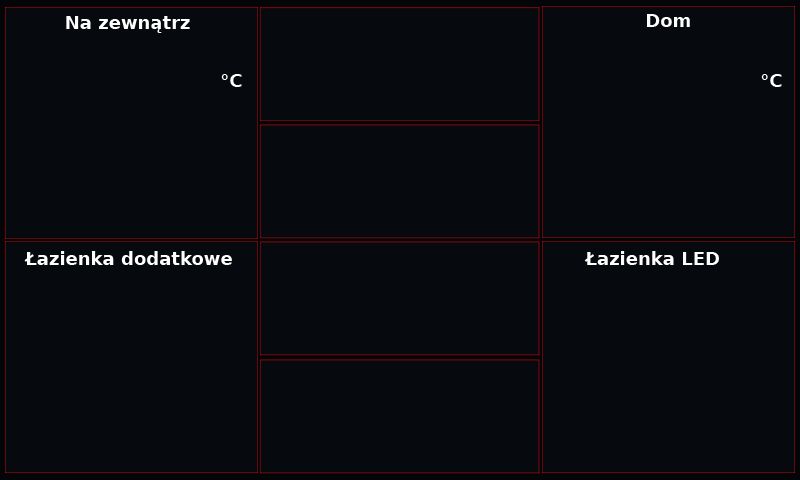
<style>
.page{position:relative;width:800px;height:480px;background:#06090d}
.page>*{position:absolute;margin:0}
.t1{font:18px "DejaVuSans-Bold";color:#ffffff}
</style>
<div class="page">
<p class="t1" style="left:66px;top:16px;width:124px;height:17px">Na zewnątrz</p>
<p class="t1" style="left:647px;top:14px;width:43px;height:13px">Dom</p>
<p class="t1" style="left:221px;top:74px;width:21px;height:13px">°C</p>
<p class="t1" style="left:761px;top:74px;width:21px;height:13px">°C</p>
<p class="t1" style="left:24px;top:251px;width:208px;height:14px">Łazienka dodatkowe</p>
<p class="t1" style="left:584px;top:251px;width:135px;height:14px">Łazienka LED</p>
</div>
